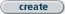
<style>
.page{position:relative;width:65px;height:14px;background:#ced3d7}
.page>*{position:absolute;margin:0}
.t1{font:10px "FrutigerBold";color:#103852}
</style>
<div class="page">
<p class="t1" style="left:19px;top:3px;width:29px;height:7px">create</p>
</div>
